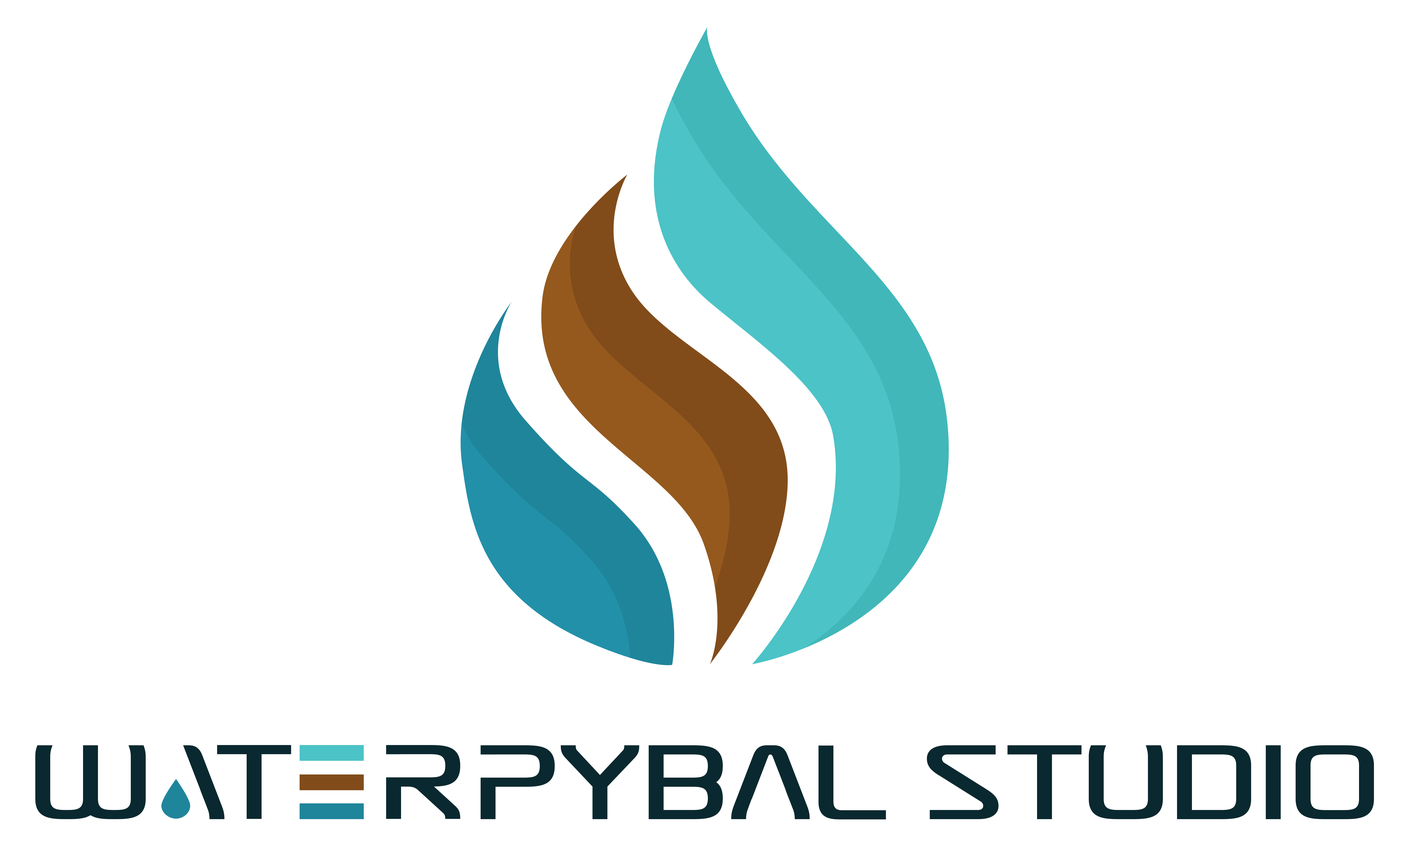
<style>
.page{position:relative;width:1409px;height:846px;background:#ffffff}
.page>*{position:absolute;margin:0}
.t1{font:99.5px "Aneo-Bold";color:#0a282f;text-transform:uppercase}
</style>
<div class="page">
<p class="t1" style="left:35px;top:745px;width:111px;height:74px">w</p>
<p class="t1" style="left:217px;top:745px;width:74px;height:74px">T</p>
<p class="t1" style="left:561px;top:745px;width:78px;height:74px">Y</p>
<p class="t1" style="left:649px;top:745px;width:74px;height:74px">B</p>
<p class="t1" style="left:819px;top:746px;width:67px;height:73px">l</p>
<p class="t1" style="left:927px;top:745px;width:72px;height:74px">s</p>
<p class="t1" style="left:1008px;top:745px;width:74px;height:74px">t</p>
<p class="t1" style="left:1089px;top:745px;width:74px;height:74px">u</p>
<p class="t1" style="left:1177px;top:745px;width:74px;height:74px">d</p>
<p class="t1" style="left:1296px;top:745px;width:78px;height:74px">o</p>
</div>
